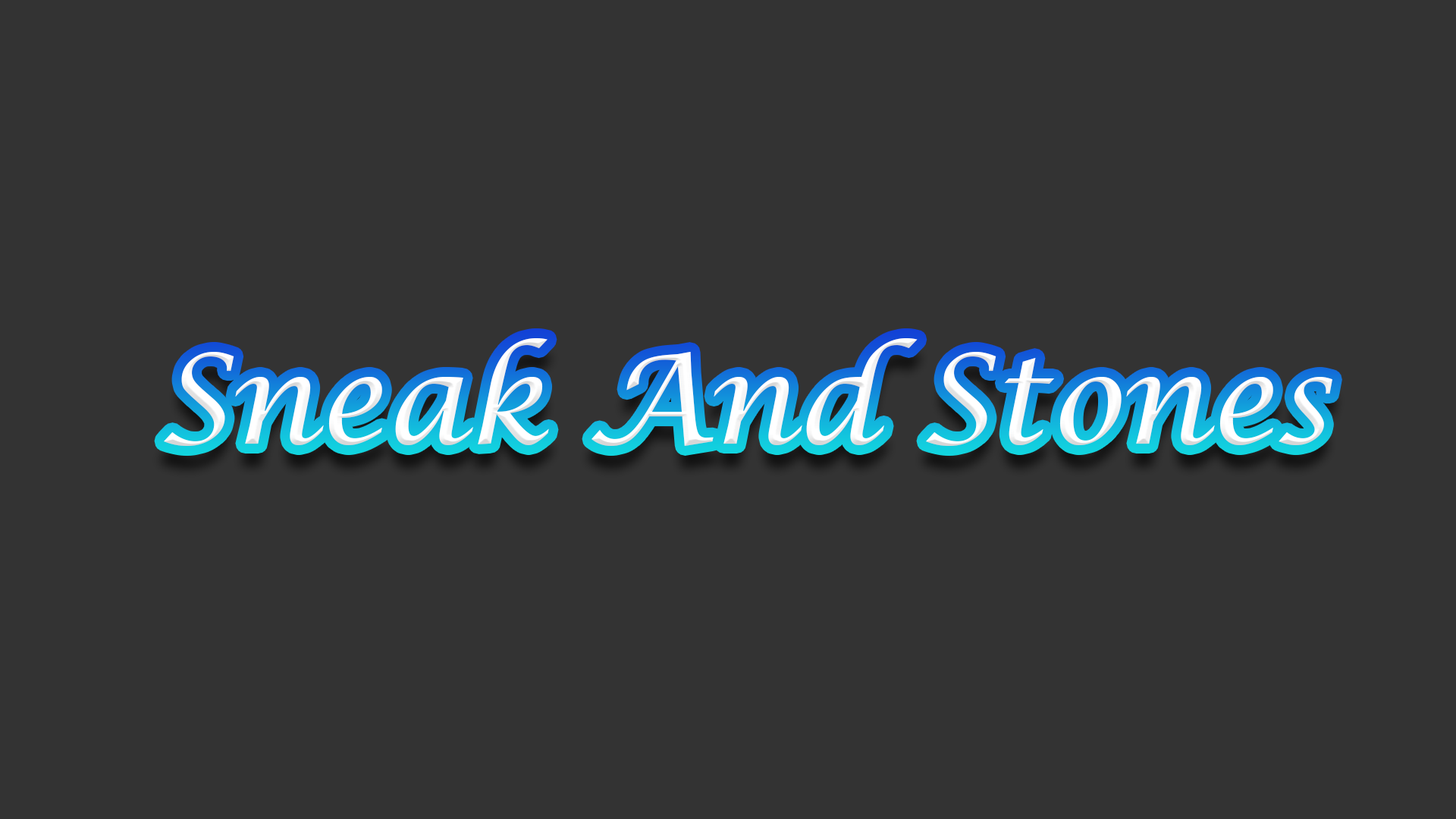
<style>
.page{position:relative;width:1456px;height:819px;background:#333333}
.page>*{position:absolute;margin:0}
.t1{font:123.9px "LucidaCalligraphy-Italic";color:#ffffff}
</style>
<div class="page">
<p class="t1" style="left:164px;top:338px;width:1168px;height:108px">Sneak And Stones</p>
</div>
